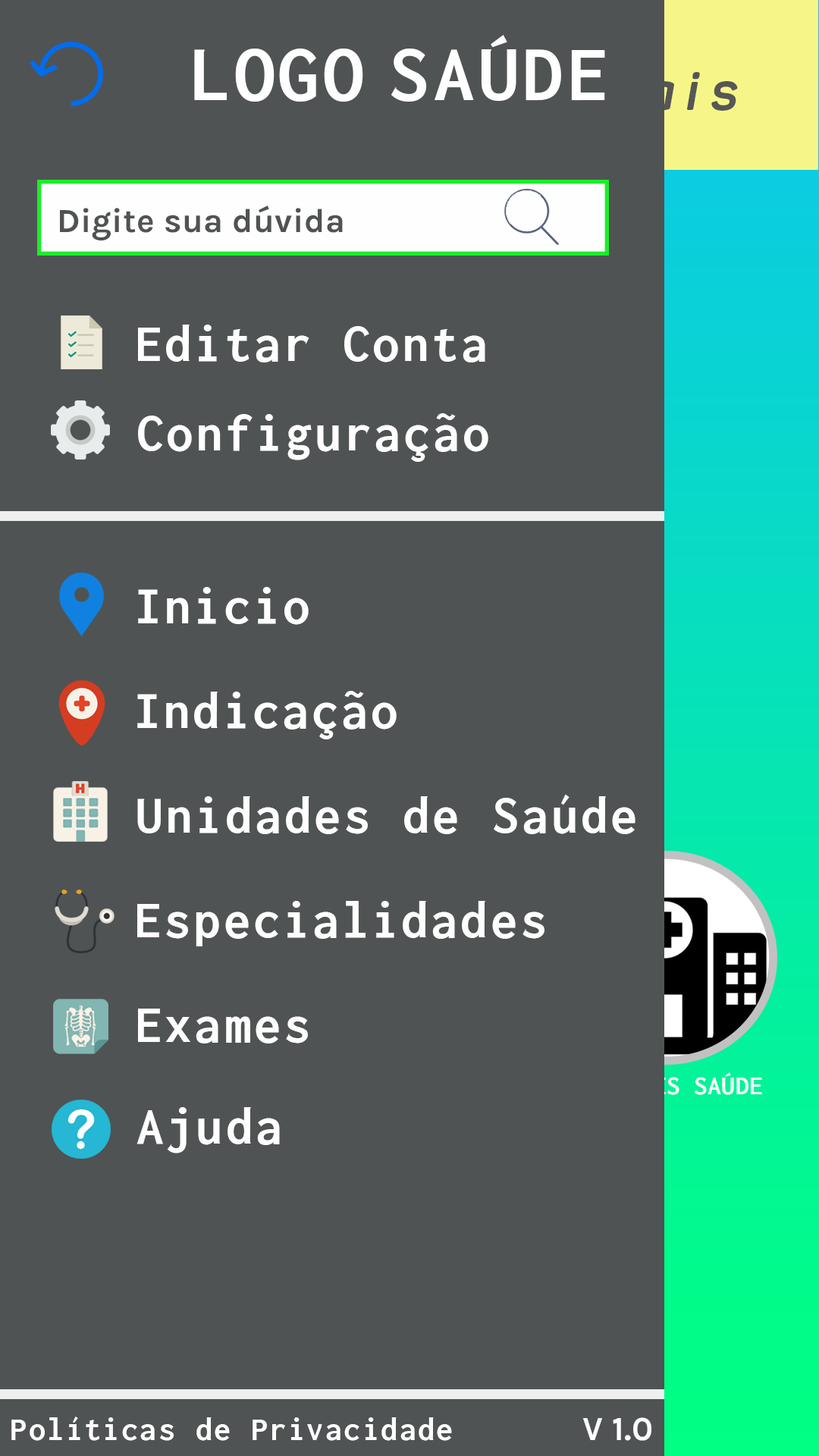
<style>
.page{position:relative;width:819px;height:1456px;background:#505353}
.page>*{position:absolute;margin:0}
.t1{font:80.9px "Inconsolata-Bold";letter-spacing:0.05em;color:#fefefe}
.t2{font:33.7px "Karla-Bold";letter-spacing:0.01em;color:#505353}
.t3{font:53.9px "Inconsolata-Bold";letter-spacing:0.05em;color:#fefefe}
.t4{font:27px "Inconsolata-Bold";letter-spacing:0.01em}
.t5{font:33.7px "Inconsolata-Bold";letter-spacing:0.05em;color:#fefefe}
.t6{font:33.7px "Karla-Bold";letter-spacing:0.01em;color:#fefefe}
</style>
<div class="page">
<p class="t1" style="left:194px;top:35px;width:411px;height:67px">LOGO SAÚDE</p>
<p class="t2" style="left:60px;top:206px;width:283px;height:35px">Digite sua dúvida</p>
<p class="t3" style="left:138px;top:325px;width:347px;height:37px">Editar Conta</p>
<p class="t3" style="left:138px;top:413px;width:350px;height:49px">Configuração</p>
<p class="t3" style="left:138px;top:587px;width:171px;height:38px">Inicio</p>
<p class="t3" style="left:137px;top:691px;width:260px;height:48px">Indicação</p>
<p class="t3" style="left:137px;top:794px;width:498px;height:40px">Unidades de Saúde</p>
<p class="t3" style="left:137px;top:901px;width:407px;height:45px">Especialidades</p>
<p class="t3" style="left:138px;top:1009px;width:170px;height:34px">Exames</p>
<p class="t4" style="left:571px;top:1072px;width:191px;height:23px">UNIDADES SAÚDE</p>
<p class="t3" style="left:136px;top:1107px;width:144px;height:46px">Ajuda</p>
<p class="t5" style="left:11px;top:1417px;width:441px;height:24px">Políticas de Privacidade</p>
<p class="t6" style="left:583px;top:1417px;width:68px;height:24px">V 1.0</p>
</div>
